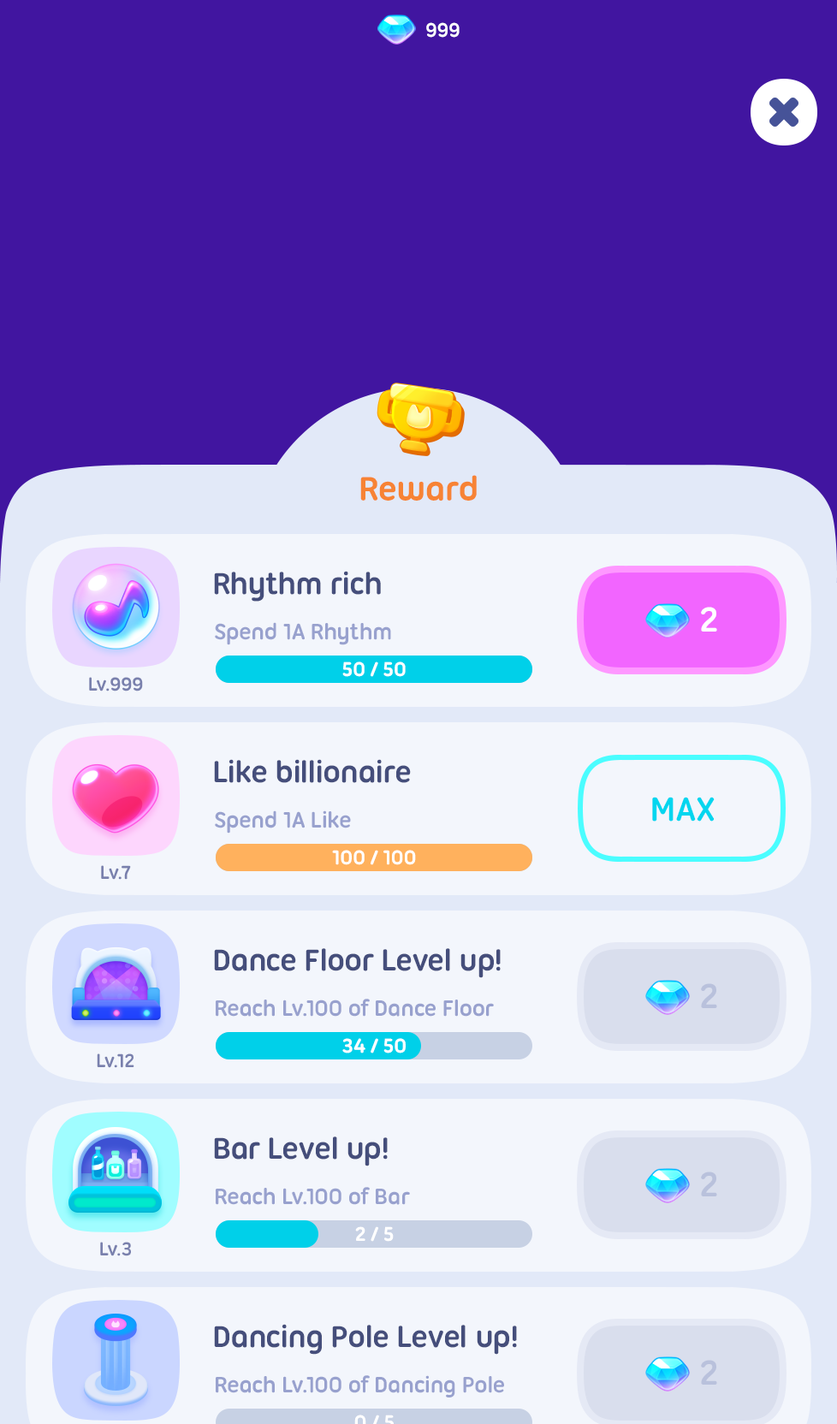
<style>
.page{position:relative;width:837px;height:1424px;background:#4115a0}
.page>*{position:absolute;margin:0}
.t1{font:21.4px "UbuntuTitling-Bold";letter-spacing:-0.025em;color:#ffffff}
.t2{font:36px "UbuntuTitling-Bold";letter-spacing:-0.025em;color:#f78335}
.t3{font:32.5px "UbuntuTitling-Bold";letter-spacing:-0.025em;color:#454e7b}
.t4{font:37.7px "UbuntuTitling-Bold";letter-spacing:-0.025em;color:#ffffff}
.t5{font:24px "UbuntuTitling-Bold";letter-spacing:-0.025em;color:#98a1ce}
.t6{font:20.5px "UbuntuTitling-Bold";letter-spacing:-0.025em;color:#7980ad}
.t7{font:36px "UbuntuTitling-Bold";letter-spacing:-0.025em;color:#03d6ef;text-transform:uppercase}
.t8{font:37.7px "UbuntuTitling-Bold";letter-spacing:-0.025em;color:#b9c1dc}
</style>
<div class="page">
<p class="t1" style="left:426px;top:22px;width:34px;height:16px">999</p>
<p class="t2" style="left:360px;top:475px;width:117px;height:27px">Reward</p>
<p class="t3" style="left:214px;top:571px;width:167px;height:31px">Rhythm rich</p>
<p class="t4" style="left:701px;top:607px;width:16px;height:25px">2</p>
<p class="t5" style="left:215px;top:622px;width:176px;height:23px">Spend 1A Rhythm</p>
<p class="t1" style="left:342px;top:662px;width:64px;height:15px">50 / 50</p>
<p class="t6" style="left:89px;top:677px;width:54px;height:15px">Lv.999</p>
<p class="t3" style="left:214px;top:759px;width:197px;height:24px">Like billionaire</p>
<p class="t7" style="left:652px;top:797px;width:63px;height:25px">Max</p>
<p class="t5" style="left:215px;top:811px;width:136px;height:23px">Spend 1A Like</p>
<p class="t1" style="left:332px;top:850px;width:84px;height:15px">100 / 100</p>
<p class="t6" style="left:101px;top:865px;width:30px;height:15px">Lv.7</p>
<p class="t3" style="left:214px;top:948px;width:287px;height:30px">Dance Floor Level up!</p>
<p class="t8" style="left:701px;top:984px;width:16px;height:24px">2</p>
<p class="t5" style="left:216px;top:999px;width:278px;height:18px">Reach Lv.100 of Dance Floor</p>
<p class="t1" style="left:342px;top:1038px;width:64px;height:16px">34 / 50</p>
<p class="t6" style="left:97px;top:1054px;width:37px;height:14px">Lv.12</p>
<p class="t3" style="left:214px;top:1137px;width:174px;height:30px">Bar Level up!</p>
<p class="t8" style="left:701px;top:1172px;width:16px;height:25px">2</p>
<p class="t5" style="left:216px;top:1187px;width:194px;height:18px">Reach Lv.100 of Bar</p>
<p class="t1" style="left:355px;top:1227px;width:39px;height:15px">2 / 5</p>
<p class="t6" style="left:100px;top:1242px;width:31px;height:15px">Lv.3</p>
<p class="t3" style="left:214px;top:1324px;width:303px;height:31px">Dancing Pole Level up!</p>
<p class="t8" style="left:701px;top:1360px;width:16px;height:25px">2</p>
<p class="t5" style="left:216px;top:1376px;width:288px;height:22px">Reach Lv.100 of Dancing Pole</p>
</div>
